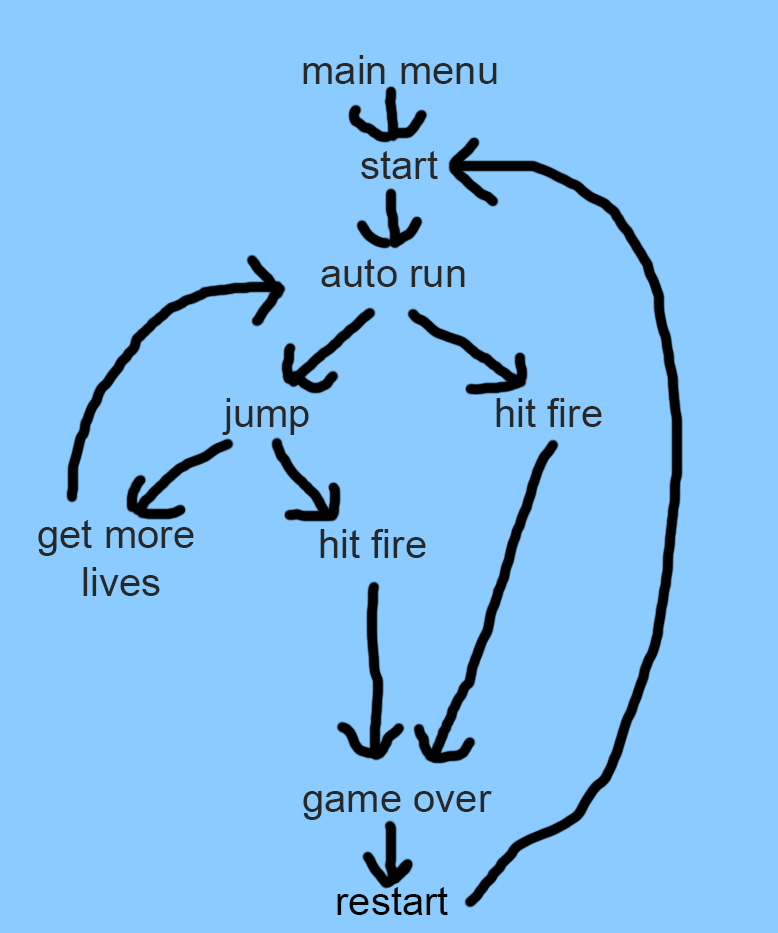
<style>
.page{position:relative;width:778px;height:933px;background:#8ccbff}
.page>*{position:absolute;margin:0}
.t1{font:40px "ArialMT";color:#282828}
.t2{font:40px "ArialMT";color:#000000}
</style>
<div class="page">
<p class="t1" style="left:303px;top:55px;width:194px;height:29px">main menu</p>
<p class="t1" style="left:361px;top:151px;width:77px;height:28px">start</p>
<p class="t1" style="left:321px;top:259px;width:144px;height:28px">auto run</p>
<p class="t1" style="left:222px;top:398px;width:87px;height:37px">jump</p>
<p class="t1" style="left:496px;top:398px;width:106px;height:29px">hit fire</p>
<p class="t1" style="left:38px;top:520px;width:156px;height:76px">get more <br>    lives</p>
<p class="t1" style="left:320px;top:529px;width:106px;height:29px">hit fire</p>
<p class="t1" style="left:303px;top:791px;width:189px;height:29px">game over</p>
<p class="t2" style="left:337px;top:887px;width:111px;height:28px">restart</p>
</div>
